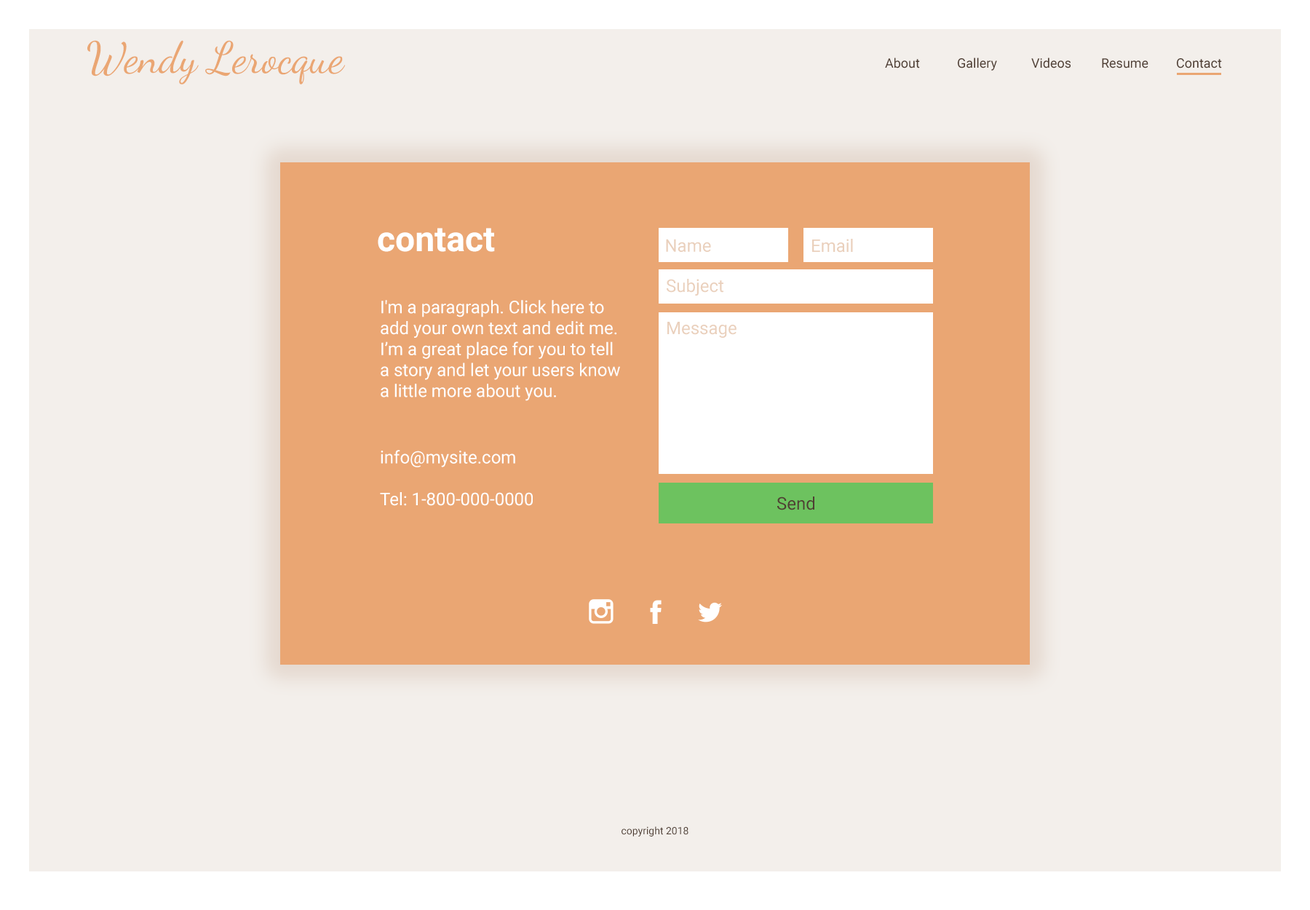
<style>
.page{position:relative;width:1310px;height:910px;background:#f3efeb}
.page>*{position:absolute;margin:0}
.t1{font:43.7px "DancingScript-Regular";color:#eaa673}
.t2{font:13.1px "Roboto-Regular";color:#4f3e33}
.t3{font:34.9px "Roboto-Bold";color:#ffffff}
.t4{font:17.5px "Roboto-Regular";color:#ead0bc}
.t5{font:17.5px "Roboto-Regular";color:#ffffff}
.t6{font:17.5px "Roboto-Regular";color:#4f3e33}
.t7{font:10.2px "Roboto-Regular";color:#4f3e33}
</style>
<div class="page">
<p class="t1" style="left:87px;top:40px;width:259px;height:44px">Wendy Lerocque</p>
<p class="t2" style="left:885px;top:58px;width:35px;height:10px">About</p>
<p class="t2" style="left:958px;top:58px;width:39px;height:13px">Gallery</p>
<p class="t2" style="left:1032px;top:58px;width:40px;height:10px">Videos</p>
<p class="t2" style="left:1102px;top:58px;width:47px;height:10px">Resume</p>
<p class="t2" style="left:1177px;top:58px;width:45px;height:10px">Contact</p>
<p class="t3" style="left:378px;top:228px;width:117px;height:24px">contact</p>
<p class="t4" style="left:666px;top:239px;width:45px;height:13px">Name</p>
<p class="t4" style="left:812px;top:239px;width:41px;height:14px">Email</p>
<p class="t4" style="left:667px;top:279px;width:57px;height:17px">Subject</p>
<p class="t5" style="left:381px;top:300px;width:239px;height:101px">I'm a paragraph. Click here to add your own text and edit me. I’m a great place for you to tell a story and let your users know a little more about you.</p>
<p class="t4" style="left:668px;top:322px;width:69px;height:16px">Message</p>
<p class="t5" style="left:380px;top:450px;width:153px;height:56px">info@mysite.com<br><br>Tel: 1-800-000-0000</p>
<p class="t6" style="left:777px;top:496px;width:38px;height:14px">Send</p>
<p class="t7" style="left:622px;top:826px;width:67px;height:10px">copyright 2018</p>
</div>
